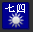
<style>
.page{position:relative;width:33px;height:32px;background:#000090}
.page>*{position:absolute;margin:0}
.t1{font:10.4px "SimSun";color:#ffffff}
</style>
<div class="page">
<p class="t1" style="left:5px;top:4px;width:20px;height:9px">七四</p>
</div>
